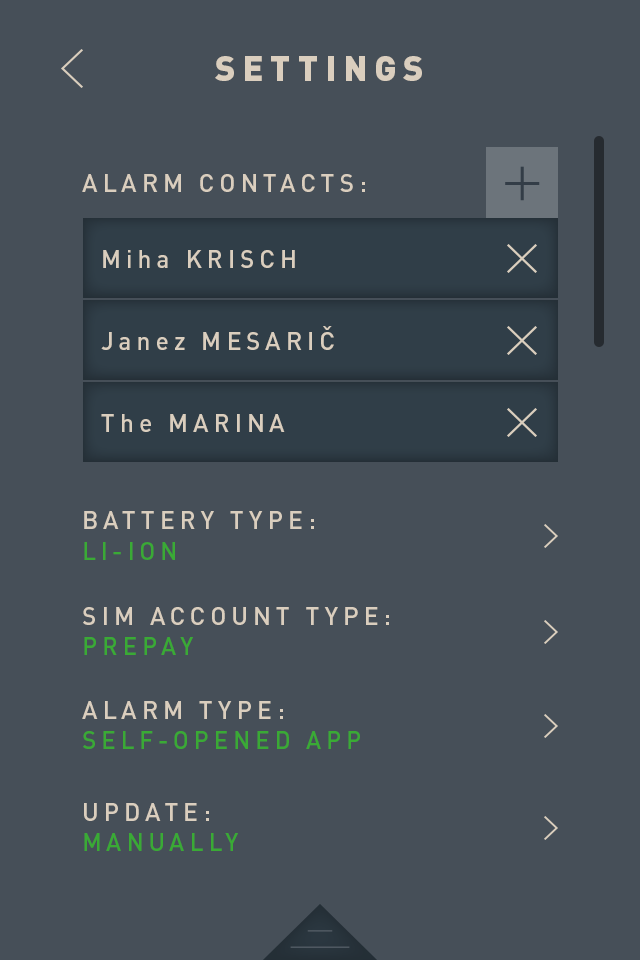
<style>
.page{position:relative;width:640px;height:960px;background:#464f58}
.page>*{position:absolute;margin:0}
.t1{font:35px "DINPro-Black";letter-spacing:0.2em;color:#dacebe}
.t2{font:25px "DINPro-Medium";letter-spacing:0.2em;color:#dacebe}
.t3{font:25.1px/105.5px "DINPro-Medium";letter-spacing:0.2em;color:#dacebe}
.t4{font:25.3px/106.3px "DINPro-Medium";letter-spacing:0.2em;color:#dacebe}
.t5{font:25.2px/106px "DINPro-Medium";letter-spacing:0.2em;color:#dacebe}
.t6{font:24.5px/30.4px "DINPro-Medium";letter-spacing:0.2em;color:#3aaa35}
.t7{font:25.2px/105.8px "DINPro-Medium";letter-spacing:0.2em;color:#dacebe}
.t8{font:24.6px/30.5px "DINPro-Medium";letter-spacing:0.2em;color:#3aaa35}
</style>
<div class="page">
<p class="t1" style="left:215px;top:56px;width:207px;height:25px">SETTINGS</p>
<p class="t2" style="left:82px;top:174px;width:283px;height:18px">ALARM CONTACTS:</p>
<p class="t3" style="left:103px;top:250px;width:192px;height:18px">Miha KRISCH<br>ISCH</p>
<p class="t4" style="left:101px;top:326px;width:233px;height:24px">Janez MESARIČ<br>ISCH</p>
<p class="t5" style="left:101px;top:414px;width:184px;height:18px">The MARINA<br>ISCH</p>
<p class="t3" style="left:84px;top:511px;width:230px;height:49px">BATTERY TYPE:<br><span class="t6">LI-ION</span></p>
<p class="t7" style="left:83px;top:607px;width:306px;height:48px">SIM ACCOUNT TYPE:<br><span class="t8">PREPAY</span></p>
<p class="t8" style="left:82px;top:701px;width:278px;height:48px"><span class="t7">ALARM TYPE:<br></span>SELF-OPENED APP</p>
<p class="t8" style="left:84px;top:803px;width:154px;height:48px"><span class="t7">UPDATE:<br></span>MANUALLY</p>
</div>
